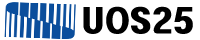
<style>
.page{position:relative;width:200px;height:40px;background:#ffffff}
.page>*{position:absolute;margin:0}
.t1{font:30px "HeadlineR-HM";color:#000000}
</style>
<div class="page">
<p class="t1" style="left:83px;top:6px;width:110px;height:28px">UOS25</p>
</div>
